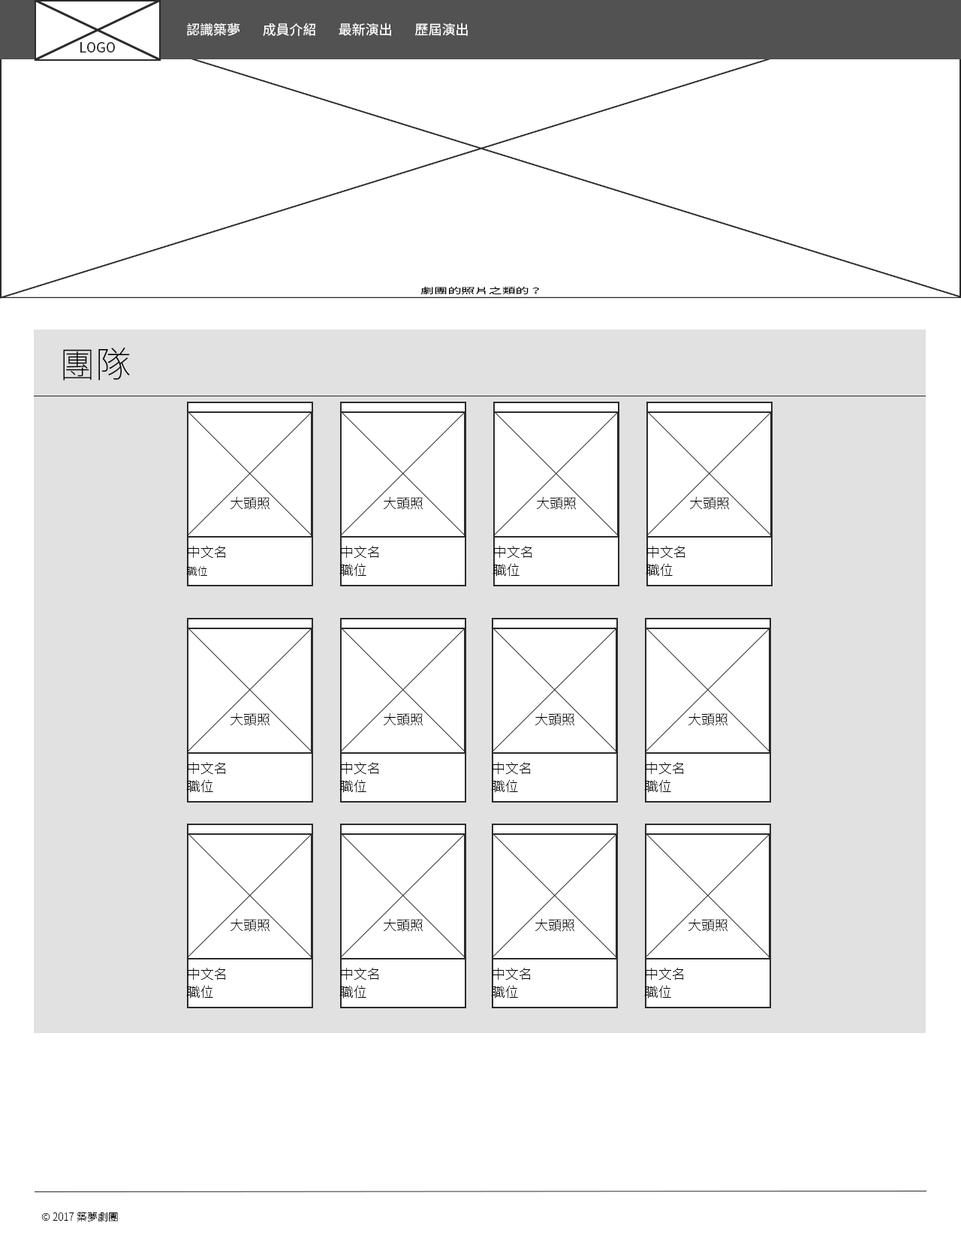
<style>
.page{position:relative;width:961px;height:1241px;background:#ffffff}
.page>*{position:absolute;margin:0}
.t1{font:13.5px "NotoSansCJKtc-Regular";color:#ffffff}
.t2{font:8px "NotoSansCJKtc-Regular";color:#000000;scale:1.68 1}
.t3{font:36px "NotoSansCJKtc-Thin";color:#000000}
.t4{font:13.5px "NotoSansCJKtc-Thin";color:#000000}
.t5{font:10.5px "NotoSansCJKtc-Thin";color:#000000}
</style>
<div class="page">
<p class="t1" style="left:187px;top:23px;width:53px;height:13px">認識築夢</p>
<p class="t1" style="left:263px;top:23px;width:52px;height:13px">成員介紹</p>
<p class="t1" style="left:339px;top:23px;width:52px;height:13px">最新演出</p>
<p class="t1" style="left:415px;top:23px;width:53px;height:13px">歷屆演出</p>
<p class="t2" style="left:420px;top:286px;width:119px;height:9px">劇團的照片之類的？</p>
<p class="t3" style="left:63px;top:347px;width:67px;height:34px">團隊</p>
<p class="t4" style="left:230px;top:496px;width:40px;height:14px">大頭照</p>
<p class="t4" style="left:188px;top:546px;width:38px;height:13px">中文名</p>
<p class="t5" style="left:186px;top:566px;width:21px;height:11px">職位</p>
<p class="t5" style="left:41px;top:1212px;width:77px;height:10px">© 2017 築夢劇團</p>
</div>
